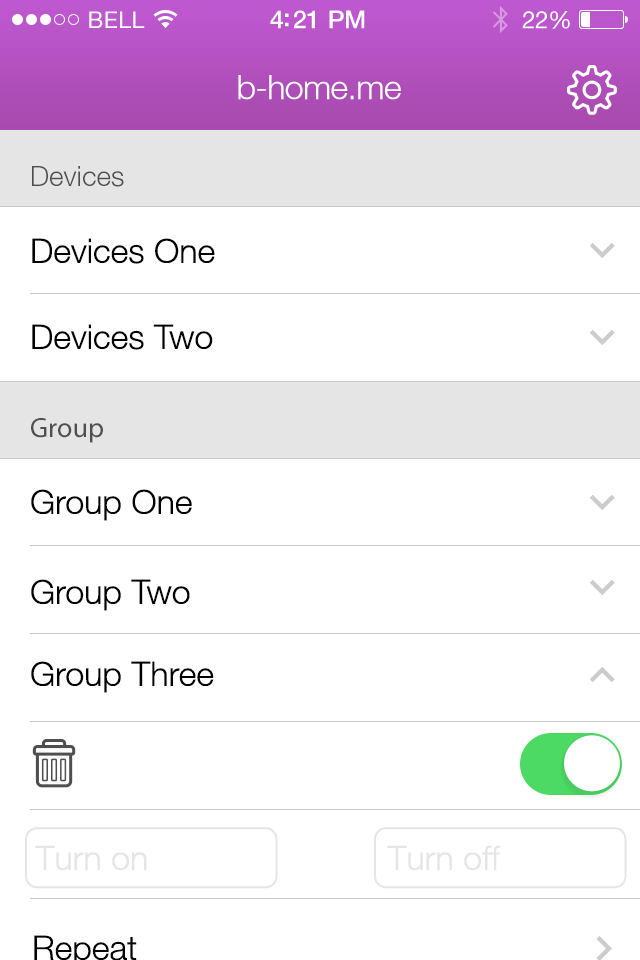
<style>
.page{position:relative;width:640px;height:960px;background:#ffffff}
.page>*{position:absolute;margin:0}
.t1{font:34px "HelveticaNeueLT-Light";letter-spacing:-0.02em;color:#fffefe}
.t2{font:28px "HelveticaNeueLT-Light";color:#4f4f4f}
.t3{font:34px "HelveticaNeueLT-Light";color:#000000}
.t4{font:28px "MyriadPro-Regular";color:#4f4f4f}
.t5{font:34px "HelveticaNeueLT-Light";color:#e5e5e5}
</style>
<div class="page">
<p class="t1" style="left:238px;top:75px;width:163px;height:25px">b-home.me</p>
<p class="t2" style="left:32px;top:166px;width:92px;height:21px">Devices</p>
<p class="t3" style="left:32px;top:238px;width:183px;height:26px">Devices One</p>
<p class="t3" style="left:32px;top:324px;width:181px;height:26px">Devices Two</p>
<p class="t4" style="left:31px;top:418px;width:72px;height:25px">Group</p>
<p class="t3" style="left:31px;top:489px;width:161px;height:32px">Group One</p>
<p class="t3" style="left:31px;top:579px;width:159px;height:32px">Group Two</p>
<p class="t3" style="left:31px;top:661px;width:183px;height:32px">Group Three</p>
<p class="t5" style="left:35px;top:845px;width:112px;height:26px">Turn on</p>
<p class="t5" style="left:387px;top:845px;width:114px;height:26px">Turn off</p>
</div>
